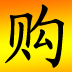
<style>
.page{position:relative;width:72px;height:72px}
.page>*{position:absolute;margin:0}
.t1{font:72px "KaiTi_GB2312";color:#000000}
</style>
<div class="page">
<p class="t1" style="left:5px;top:4px;width:59px;height:64px">购</p>
</div>
